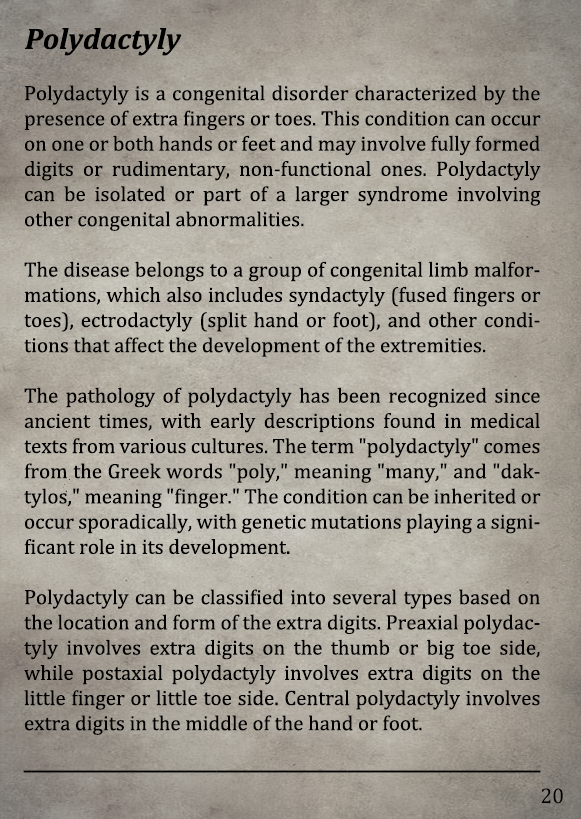
<style>
.page{position:relative;width:581px;height:819px}
.page>*{position:absolute;margin:0}
.t1{font:30px "Cambria-BoldItalic";color:#000000}
.t2{font:21px "Cambria";color:#000000}
.t3{font:21px "Arimo";color:#000000;scale:0.66 1}
.t4{font:21.5px "Cambria";color:#000000}
</style>
<div class="page">
<p class="t1" style="left:25px;top:28px;width:157px;height:28px">Polydactyly</p>
<p class="t2" style="left:24px;top:85px;width:517px;height:650px;text-align:justify">Polydactyly is a congenital disorder characterized by the presence of extra fingers or toes. This condition can occur on one or both hands or feet and may involve fully formed digits or rudimentary, non-functional ones. Polydactyly can be isolated or part of a larger syndrome involving other congenital abnormalities.<br><br>The disease belongs to a group of congenital limb malformations, which also includes syndactyly (fused fingers or toes), ectrodactyly (split hand or foot), and other conditions that affect the development of the extremities.<br><br>The pathology of polydactyly has been recognized since ancient times, with early descriptions found in medical texts from various cultures. The term "polydactyly" comes from the Greek words "poly," meaning "many," and "daktylos," meaning "finger." The condition can be inherited or occur sporadically, with genetic mutations playing a significant role in its development.<br><br>Polydactyly can be classified into several types based on the location and form of the extra digits. Preaxial polydactyly involves extra digits on the thumb or big toe side, while postaxial polydactyly involves extra digits on the little finger or little toe side. Central polydactyly involves extra digits in the middle of the hand or foot.</p>
<p class="t3" style="left:23px;top:770px;width:518px;height:3px">___________________________________________________________________</p>
<p class="t4" style="left:541px;top:788px;width:22px;height:16px">20</p>
</div>
